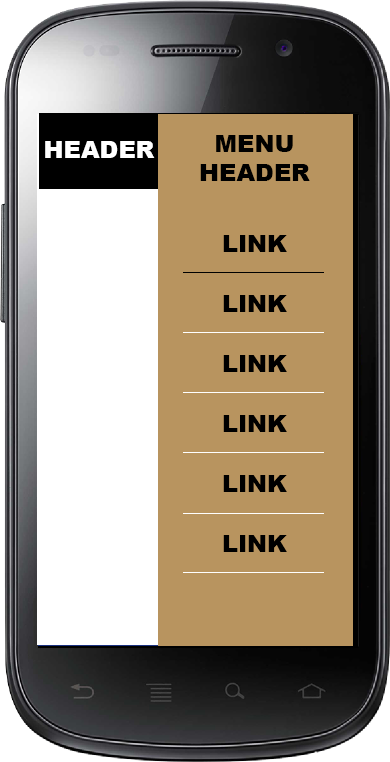
<style>
.page{position:relative;width:390px;height:762px;background:#b8945f}
.page>*{position:absolute;margin:0}
.t1{font:24px "Arial-Black";color:#000000}
.t2{font:24px "Arial-Black";color:#ffffff}
</style>
<div class="page">
<p class="t1" style="left:200px;top:135px;width:110px;height:46px;text-align:center">MENU<br>HEADER</p>
<p class="t2" style="left:45px;top:141px;width:110px;height:17px">HEADER</p>
<p class="t1" style="left:223px;top:235px;width:64px;height:17px">LINK</p>
<p class="t1" style="left:223px;top:295px;width:64px;height:17px">LINK</p>
<p class="t1" style="left:223px;top:355px;width:64px;height:17px">LINK</p>
<p class="t1" style="left:223px;top:415px;width:64px;height:17px">LINK</p>
<p class="t1" style="left:223px;top:475px;width:64px;height:17px">LINK</p>
<p class="t1" style="left:223px;top:535px;width:64px;height:17px">LINK</p>
</div>
